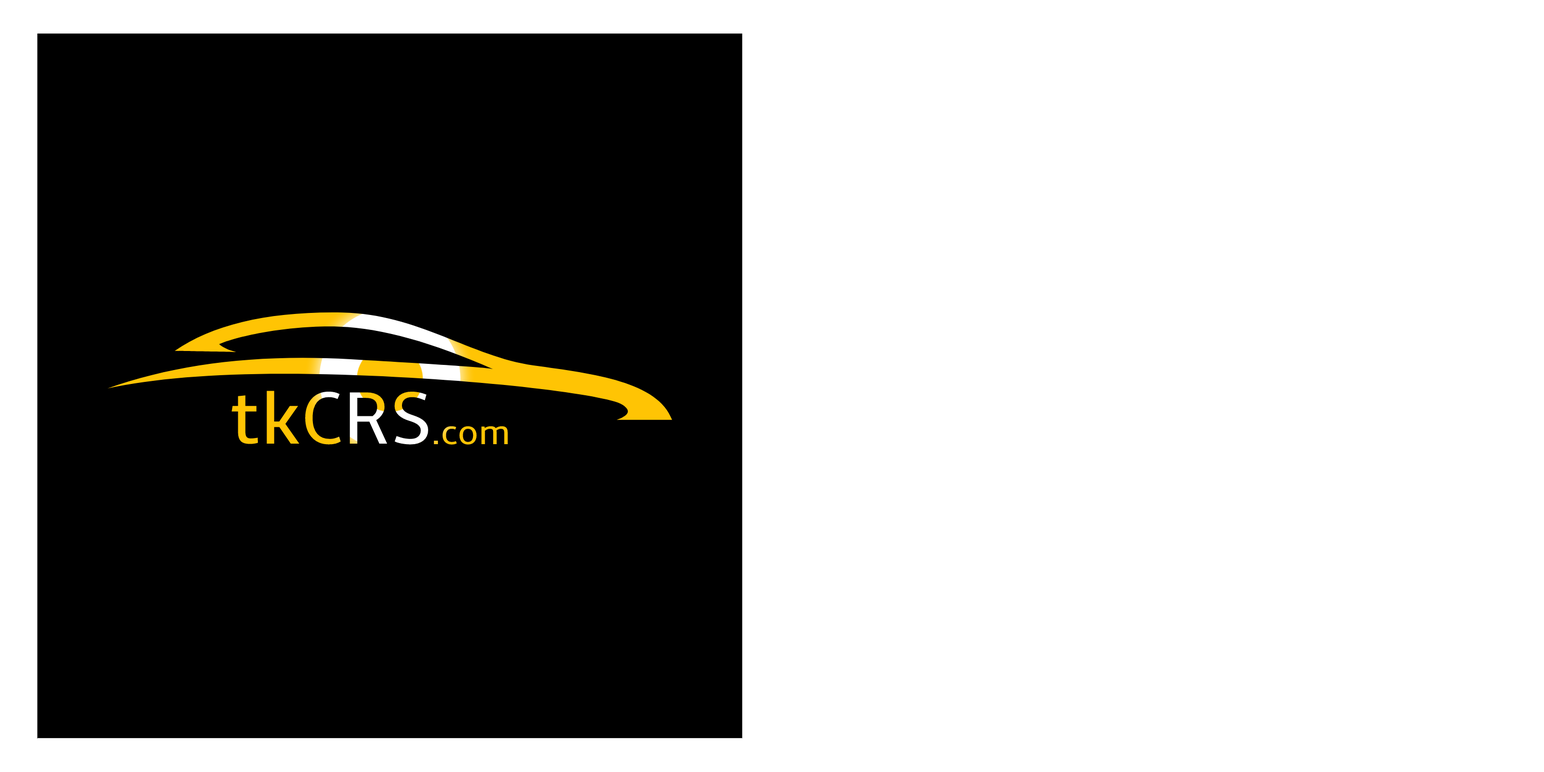
<style>
.page{position:relative;width:1544px;height:772px;background:#ffffff}
.page>*{position:absolute;margin:0}
.t1{font:77.2px "Amble-Regular"}
.t2{font:36px "Amble-Regular";color:#ffc404}
</style>
<div class="page">
<p class="t1" style="left:232px;top:391px;width:196px;height:54px">tkCRS</p>
<p class="t2" style="left:434px;top:426px;width:74px;height:19px">.com</p>
</div>
